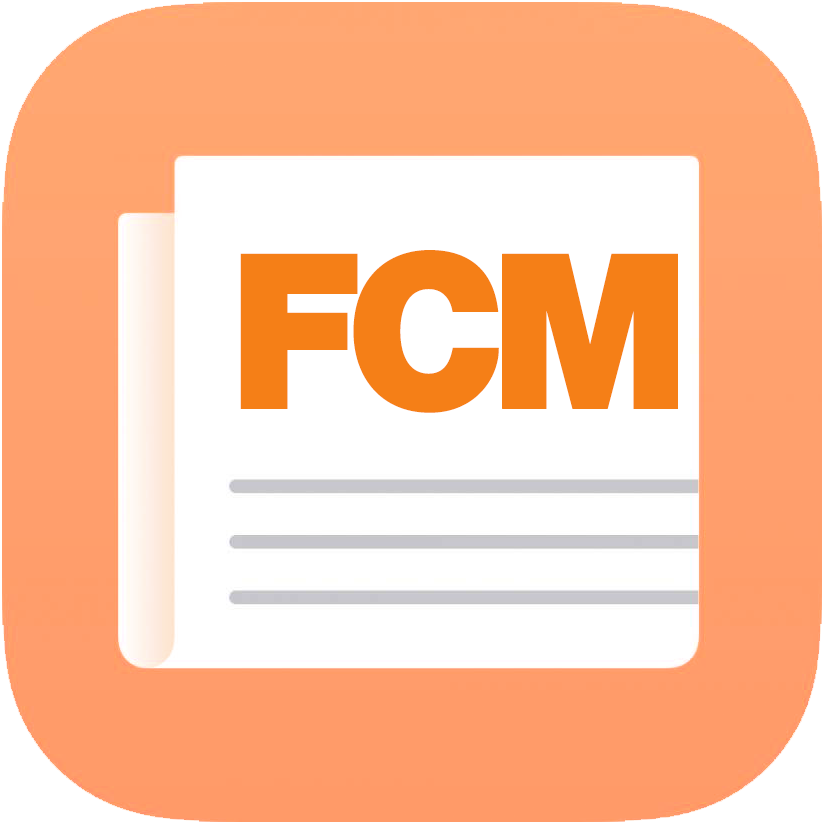
<style>
.page{position:relative;width:825px;height:825px;background:#ffffff}
.page>*{position:absolute;margin:0}
.t1{font:216.8px "HelveticaNeue-Black";letter-spacing:-0.1em;color:#f57f17;font-weight:bold}
</style>
<div class="page">
<p class="t1" style="left:240px;top:250px;width:438px;height:163px">FCM</p>
</div>
